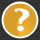
<style>
.page{position:relative;width:40px;height:40px;background:#333333}
.page>*{position:absolute;margin:0}
.t1{font:31px "EastMarket";color:#ffffff}
</style>
<div class="page">
<p class="t1" style="left:14px;top:8px;width:16px;height:24px">?</p>
</div>
